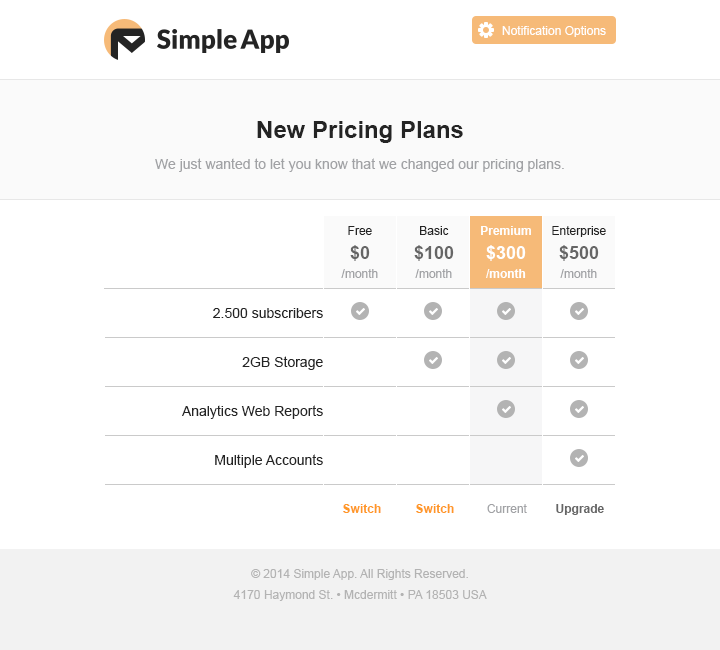
<style>
.page{position:relative;width:720px;height:650px;background:#ffffff}
.page>*{position:absolute;margin:0}
.t1{font:12px "ArialMT";color:#ffffff}
.t2{font:24px "Arial-BoldMT";color:#242424}
.t3{font:14px "ArialMT";color:#a1a2a5}
.t4{font:12px/19px "ArialMT";color:#a1a2a5}
.t5{font:12px/24px "ArialMT";color:#242424}
.t6{font:18px/24px "Arial-BoldMT";color:#666666}
.t7{font:12px/24px "Arial-BoldMT";color:#ffffff}
.t8{font:18px/24px "Arial-BoldMT";color:#ffffff}
.t9{font:12px/19px "Arial-BoldMT";color:#ffffff}
.t10{font:14px/49px "ArialMT";color:#242424}
.t11{font:12px "Arial-BoldMT";color:#ff9826}
.t12{font:12px "ArialMT";color:#a1a2a5}
.t13{font:12px "Arial-BoldMT";color:#666666}
.t14{font:12px/21px "ArialMT";color:#b3b3b3}
</style>
<div class="page">
<p class="t1" style="left:502px;top:26px;width:104px;height:11px">Notification Options</p>
<p class="t2" style="left:257px;top:121px;width:206px;height:22px">New Pricing Plans</p>
<p class="t3" style="left:155px;top:158px;width:409px;height:14px">We just wanted to let you know that we changed our pricing plans.</p>
<p class="t4" style="left:341px;top:226px;width:37px;height:52px;text-align:center"><span class="t5">Free<br></span><span class="t6">$0<br></span>/month</p>
<p class="t4" style="left:414px;top:226px;width:40px;height:52px;text-align:center"><span class="t5">Basic<br></span><span class="t6">$100<br></span>/month</p>
<p class="t7" style="left:481px;top:226px;width:50px;height:52px;text-align:center">Premium<br><span class="t8">$300<br></span><span class="t9">/month</span></p>
<p class="t5" style="left:552px;top:226px;width:54px;height:52px;text-align:center">Enterprise<br><span class="t6">$500<br></span><span class="t4">/month</span></p>
<p class="t10" style="left:182px;top:308px;width:141px;height:160px;text-align:right">2.500 subscribers<br>2GB Storage<br>Analytics Web Reports<br>Multiple Accounts</p>
<p class="t11" style="left:343px;top:504px;width:38px;height:9px">Switch</p>
<p class="t11" style="left:416px;top:504px;width:38px;height:9px">Switch</p>
<p class="t12" style="left:487px;top:504px;width:40px;height:9px">Current</p>
<p class="t13" style="left:556px;top:504px;width:48px;height:11px">Upgrade</p>
<p class="t14" style="left:233px;top:569px;width:254px;height:32px;text-align:center">© 2014 Simple App. All Rights Reserved.<br>4170 Haymond St. • Mcdermitt • PA 18503 USA</p>
</div>
